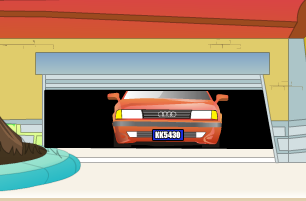
<style>
.page{position:relative;width:306px;height:201px}
.page>*{position:absolute;margin:0}
.t1{font:8px "Impact";color:#ffffff}
</style>
<div class="page">
<p class="t1" style="left:155px;top:131px;width:26px;height:8px">KK5430</p>
</div>
